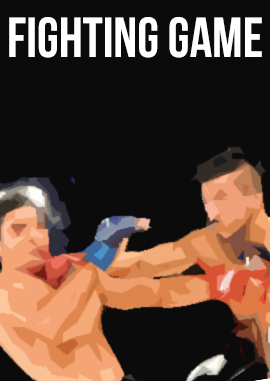
<style>
.page{position:relative;width:270px;height:381px;background:#0b0b0b}
.page>*{position:absolute;margin:0}
.t1{font:56.4px "BebasNeueBold";color:#ffffff}
</style>
<div class="page">
<p class="t1" style="left:9px;top:17px;width:253px;height:41px">FIGHTING GAME</p>
</div>
